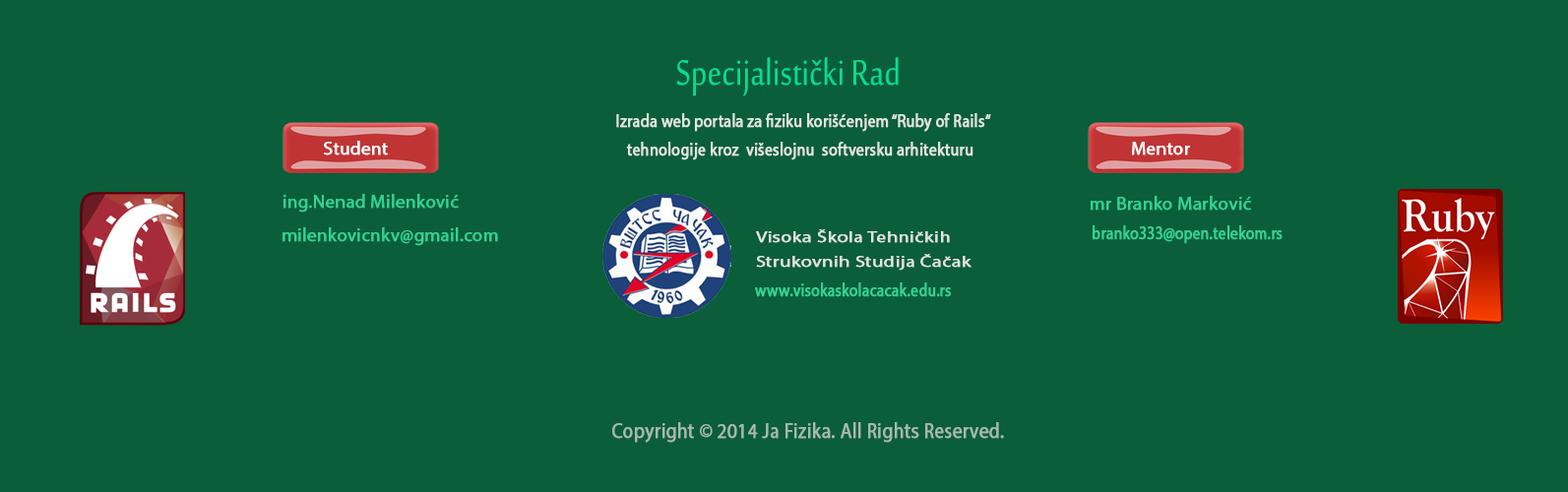
<style>
.page{position:relative;width:1568px;height:492px;background:#0a5e3a}
.page>*{position:absolute;margin:0}
.t1{font:49.2px "SakkalMajalla";color:#09dc8f;scale:0.83 1}
.t2{font:18.2px "MyriadPro-Regular";color:#dee5e1;font-weight:bold;scale:0.85 1}
.t3{font:18.5px "MyriadPro-Regular";color:#ffffff;font-weight:bold}
.t4{font:18.5px "MyriadPro-Regular";color:#34d292;font-weight:bold}
.t5{font:14.8px "MyriadPro-Regular";color:#dee5e1;font-weight:bold;scale:1.33 1}
.t6{font:18.5px "MyriadPro-Regular";color:#34d292;font-weight:bold;scale:0.82 1}
.t7{font:21.2px "MyriadPro-Regular";color:#a5baaf;font-weight:bold;scale:0.89 1}
</style>
<div class="page">
<p class="t1" style="left:676px;top:57px;width:223px;height:39px">Specijalistički Rad</p>
<p class="t2" style="left:616px;top:113px;width:375px;height:19px">Izrada web portala za fiziku korišćenjem “Ruby of Rails“</p>
<p class="t3" style="left:324px;top:141px;width:64px;height:15px">Student</p>
<p class="t2" style="left:626px;top:142px;width:347px;height:18px">tehnologije kroz  višeslojnu  softversku arhitekturu</p>
<p class="t3" style="left:1132px;top:142px;width:58px;height:14px">Mentor</p>
<p class="t4" style="left:283px;top:194px;width:176px;height:19px">ing.Nenad Milenković</p>
<p class="t4" style="left:1091px;top:196px;width:160px;height:15px">mr Branko Marković</p>
<p class="t4" style="left:282px;top:227px;width:216px;height:19px">milenkovicnkv@gmail.com</p>
<p class="t5" style="left:756px;top:229px;width:194px;height:14px">Visoka Škola Tehničkih</p>
<p class="t6" style="left:1093px;top:225px;width:190px;height:19px">branko333@open.telekom.rs</p>
<p class="t5" style="left:756px;top:254px;width:216px;height:17px">Strukovnih Studija Čačak</p>
<p class="t6" style="left:755px;top:282px;width:196px;height:15px">www.visokaskolacacak.edu.rs</p>
<p class="t7" style="left:612px;top:422px;width:392px;height:21px">Copyright © 2014 Ja Fizika. All Rights Reserved.</p>
</div>
